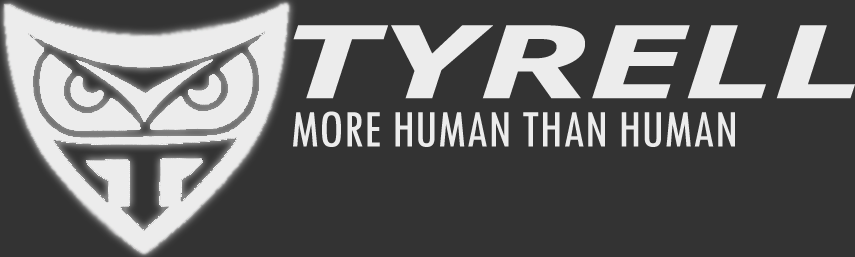
<style>
.page{position:relative;width:855px;height:257px;background:#333333}
.page>*{position:absolute;margin:0}
.t1{font:100px "Verdana-BoldItalic";color:#ececec;scale:1.4 1}
.t2{font:55px "TwCenMT-Condensed";color:#ececec}
</style>
<div class="page">
<p class="t1" style="left:293px;top:25px;width:562px;height:74px">TYRELL</p>
<p class="t2" style="left:293px;top:111px;width:442px;height:36px">MORE HUMAN THAN HUMAN</p>
</div>
